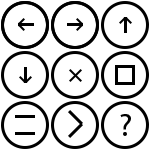
<style>
.page{position:relative;width:150px;height:150px;background:#ffffff}
.page>*{position:absolute;margin:0}
.t1{font:32.8px "MyriadPro-Regular";color:#000000}
</style>
<div class="page">
<p class="t1" style="left:120px;top:114px;width:11px;height:22px">?</p>
</div>
